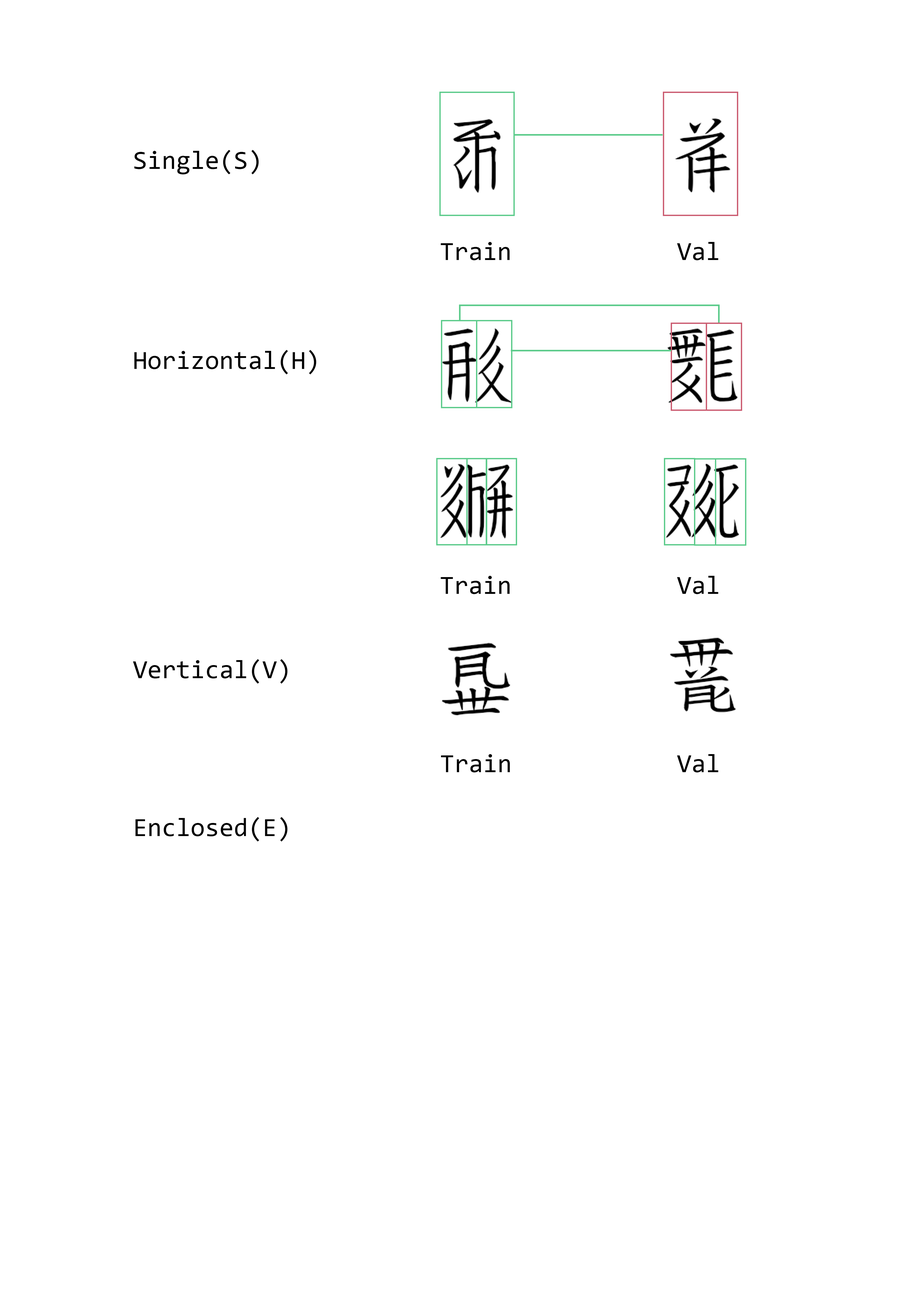
<style>
.page{position:relative;width:918px;height:1299px;background:#ffffff}
.page>*{position:absolute;margin:0}
.t1{font:26.2px "Consolas";color:#000000}
</style>
<div class="page">
<p class="t1" style="left:134px;top:150px;width:125px;height:24px">Single(S)</p>
<p class="t1" style="left:441px;top:242px;width:69px;height:18px">Train</p>
<p class="t1" style="left:677px;top:242px;width:42px;height:18px">Val</p>
<p class="t1" style="left:134px;top:350px;width:182px;height:24px">Horizontal(H)</p>
<p class="t1" style="left:441px;top:576px;width:69px;height:18px">Train</p>
<p class="t1" style="left:677px;top:576px;width:42px;height:18px">Val</p>
<p class="t1" style="left:133px;top:659px;width:155px;height:24px">Vertical(V)</p>
<p class="t1" style="left:441px;top:754px;width:69px;height:18px">Train</p>
<p class="t1" style="left:677px;top:754px;width:42px;height:18px">Val</p>
<p class="t1" style="left:135px;top:817px;width:153px;height:24px">Enclosed(E)</p>
</div>
